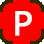
<style>
.page{position:relative;width:44px;height:44px;background:#ff0000}
.page>*{position:absolute;margin:0}
.t1{font:33.3px "Verdana";color:#ffffff;font-weight:bold}
</style>
<div class="page">
<p class="t1" style="left:15px;top:11px;width:17px;height:25px">P</p>
</div>
